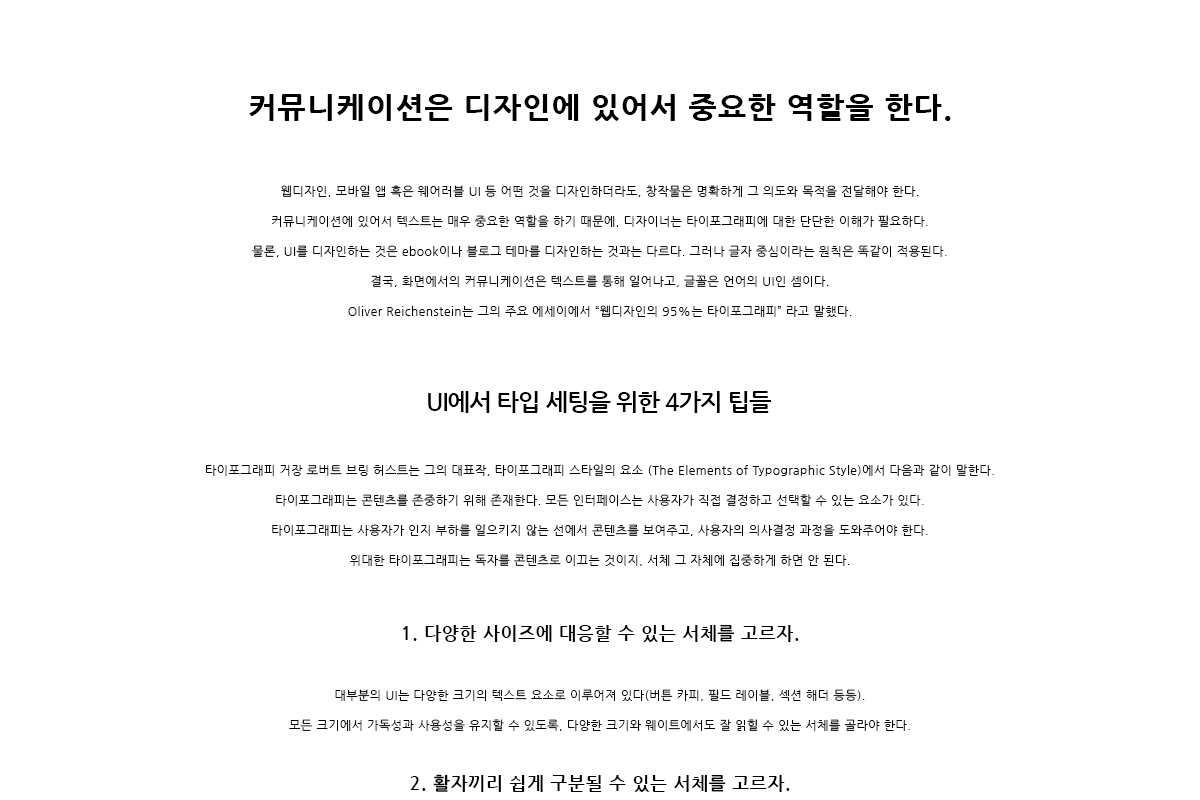
<style>
.page{position:relative;width:1200px;height:800px;background:#ffffff}
.page>*{position:absolute;margin:0}
.t1{font:30px "NanumGothicExtraBold";letter-spacing:0.04em;color:#000000}
.t2{font:12px/30px "NanumGothic";letter-spacing:0.04em;color:#000000}
.t3{font:24px "NanumGothicBold";letter-spacing:-0.04em;color:#000000}
</style>
<div class="page">
<p class="t1" style="left:249px;top:94px;width:702px;height:27px">커뮤니케이션은 디자인에 있어서 중요한 역할을 한다.</p>
<p class="t2" style="left:252px;top:185px;width:695px;height:132px;text-align:center">웹디자인, 모바일 앱 혹은 웨어러블 UI 등 어떤 것을 디자인하더라도, 창작물은 명확하게 그 의도와 목적을 전달해야 한다. <br>커뮤니케이션에 있어서 텍스트는 매우 중요한 역할을 하기 때문에, 디자이너는 타이포그래피에 대한 단단한 이해가 필요하다.<br>물론, UI를 디자인하는 것은 ebook이나 블로그 테마를 디자인하는 것과는 다르다. 그러나 글자 중심이라는 원칙은 똑같이 적용된다. <br>결국, 화면에서의 커뮤니케이션은 텍스트를 통해 일어나고, 글꼴은 언어의 UI인 셈이다. <br>Oliver Reichenstein는 그의 주요 에세이에서 “웹디자인의 95%는 타이포그래피” 라고 말했다.</p>
<p class="t3" style="left:428px;top:391px;width:343px;height:22px">UI에서 타입 세팅을 위한 4가지 팁들</p>
<p class="t2" style="left:206px;top:464px;width:788px;height:102px;text-align:center">타이포그래피 거장 로버트 브링 허스트는 그의 대표작, 타이포그래피 스타일의 요소 (The Elements of Typographic Style)에서 다음과 같이 말한다.<br>타이포그래피는 콘텐츠를 존중하기 위해 존재한다. 모든 인터페이스는 사용자가 직접 결정하고 선택할 수 있는 요소가 있다. <br>타이포그래피는 사용자가 인지 부하를 일으키지 않는 선에서 콘텐츠를 보여주고, 사용자의 의사결정 과정을 도와주어야 한다. <br>위대한 타이포그래피는 독자를 콘텐츠로 이끄는 것이지, 서체 그 자체에 집중하게 하면 안 된다.</p>
</div>
